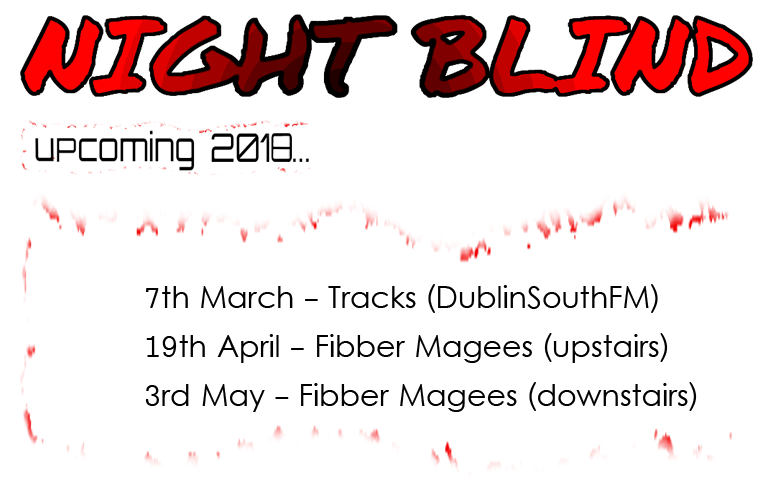
<style>
.page{position:relative;width:780px;height:500px;background:#ffffff}
.page>*{position:absolute;margin:0}
.t1{font:30px "LevenimMT";color:#000000}
</style>
<div class="page">
<p class="t1" style="left:145px;top:284px;width:513px;height:29px">7th March - Tracks (DublinSouthFM)</p>
<p class="t1" style="left:146px;top:333px;width:522px;height:30px">19th April - Fibber Magees (upstairs)</p>
<p class="t1" style="left:145px;top:382px;width:552px;height:30px">3rd May - Fibber Magees (downstairs)</p>
</div>
